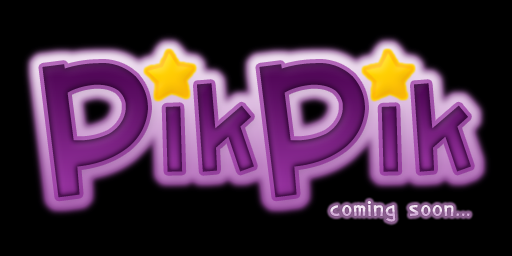
<style>
.page{position:relative;width:512px;height:256px;background:#000000}
.page>*{position:absolute;margin:0}
.t1{font:216px "01tama"}
.t2{font:24px "01tama"}
</style>
<div class="page">
<p class="t1" style="left:42px;top:63px;width:106px;height:135px">P</p>
<p class="t1" style="left:259px;top:63px;width:106px;height:135px">P</p>
<p class="t2" style="left:330px;top:201px;width:140px;height:21px">coming soon...</p>
</div>
